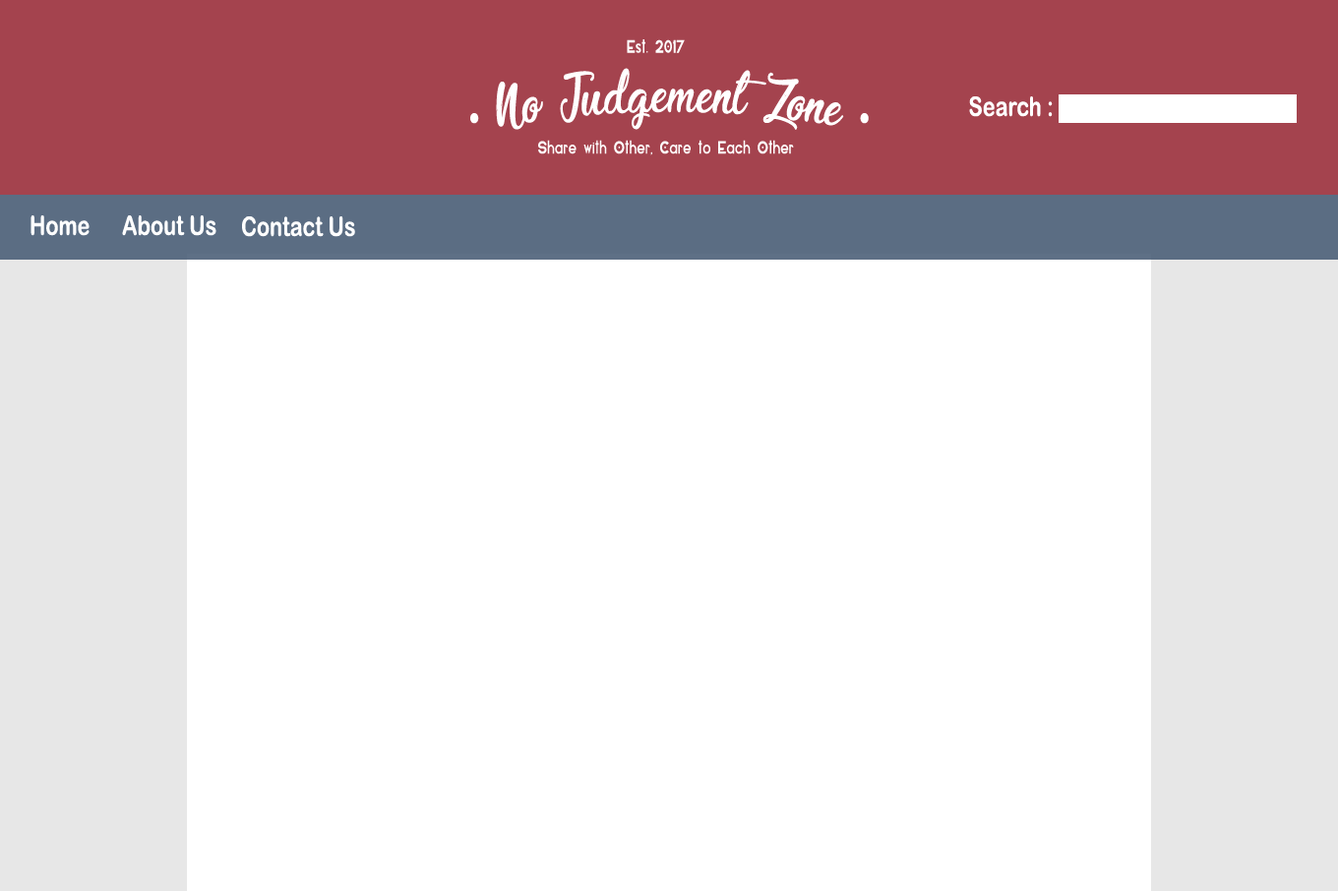
<style>
.page{position:relative;width:1338px;height:891px;background:#ffffff}
.page>*{position:absolute;margin:0}
.t1{font:17px "Elianto-Regular";color:#ffffff;scale:0.79 1}
.t2{font:51.2px "Enchanting-Celebrations";color:#ffffff;scale:0.77 1}
.t3{font:26.9px "ArialRoundedMTBold";color:#ffffff;scale:0.79 1}
.t4{font:115px "Elianto-Regular";color:#ffffff;scale:0.79 1}
.t5{font:26.9px "ArialRoundedMTBold";color:#fefefe;scale:0.79 1}
</style>
<div class="page">
<p class="t1" style="left:627px;top:39px;width:58px;height:14px">Est. 2017</p>
<p class="t2" style="left:496px;top:68px;width:348px;height:62px">No Judgement Zone</p>
<p class="t3" style="left:969px;top:96px;width:84px;height:21px">Search :</p>
<p class="t4" style="left:470px;top:113px;width:9px;height:11px">.</p>
<p class="t4" style="left:860px;top:113px;width:9px;height:11px">.</p>
<p class="t1" style="left:538px;top:140px;width:256px;height:15px">Share with Other, Care to Each Other</p>
<p class="t5" style="left:30px;top:215px;width:60px;height:21px">Home</p>
<p class="t5" style="left:122px;top:215px;width:94px;height:21px">About Us</p>
<p class="t5" style="left:242px;top:216px;width:113px;height:21px">Contact Us</p>
</div>
